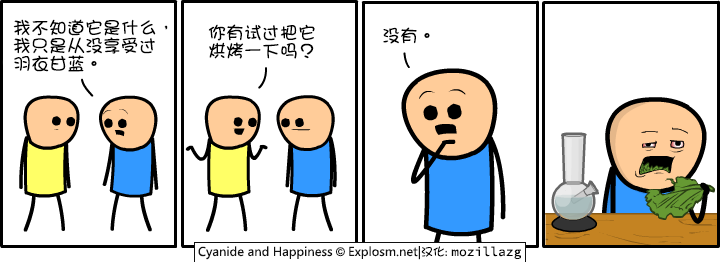
<style>
.page{position:relative;width:721px;height:262px;background:#ffffff}
.page>*{position:absolute;margin:0}
.t1{font:18px/18px "DFGirl";color:#000000}
.t2{font:18px "DFGirl";color:#000000}
</style>
<div class="page">
<p class="t1" style="left:13px;top:19px;width:155px;height:53px">我不知道它是什么，<br>我只是从没享受过<br>羽衣甘蓝。</p>
<p class="t1" style="left:208px;top:24px;width:107px;height:35px">你有试过把它<br>烘烤一下吗？</p>
<p class="t2" style="left:383px;top:27px;width:47px;height:17px">没有。</p>
</div>
